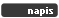
<style>
.page{position:relative;width:59px;height:18px;background:#383838}
.page>*{position:absolute;margin:0}
.t1{font:9px "Tahoma";color:#ffffff;font-weight:bold}
</style>
<div class="page">
<p class="t1" style="left:28px;top:7px;width:25px;height:9px">napis</p>
</div>
